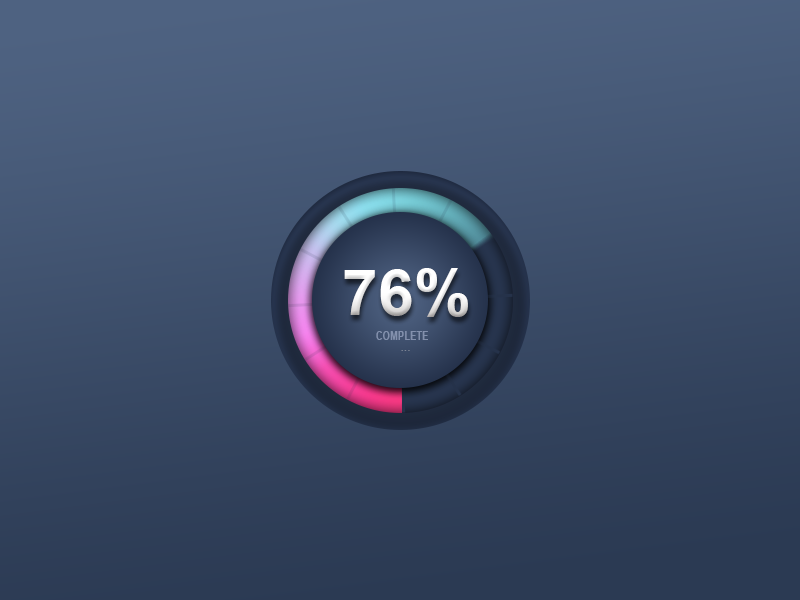
<style>
.page{position:relative;width:800px;height:600px}
.page>*{position:absolute;margin:0}
.t1{font:64.3px "Arial-BoldMT";color:#ffffff}
.t2{font:12px "Arial-BoldMT";color:#8391ad;scale:0.79 1}
.t3{font:12px "ArialMT";color:#7d8595}
</style>
<div class="page">
<p class="t1" style="left:344px;top:268px;width:124px;height:49px">76%</p>
<p class="t2" style="left:376px;top:331px;width:52px;height:9px">COMPLETE</p>
<p class="t3" style="left:401px;top:350px;width:9px;height:1px">...</p>
</div>
